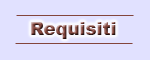
<style>
.page{position:relative;width:150px;height:60px;background:#e1e1ff}
.page>*{position:absolute;margin:0}
.t1{font:18px "Arial-Black"}
</style>
<div class="page">
<p class="t1" style="left:31px;top:22px;width:85px;height:17px">Requisiti</p>
</div>
